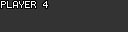
<style>
.page{position:relative;width:128px;height:32px;background:#333333}
.page>*{position:absolute;margin:0}
.t1{font:8px "Terminal";color:#fbfbfb}
</style>
<div class="page">
<p class="t1" style="left:1px;top:1px;width:47px;height:7px">PLAYER 4</p>
</div>
